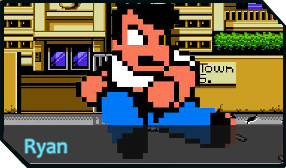
<style>
.page{position:relative;width:286px;height:168px}
.page>*{position:absolute;margin:0}
.t1{font:21px "Candara";color:#6ae2f8}
</style>
<div class="page">
<p class="t1" style="left:25px;top:139px;width:42px;height:19px">Ryan</p>
</div>
